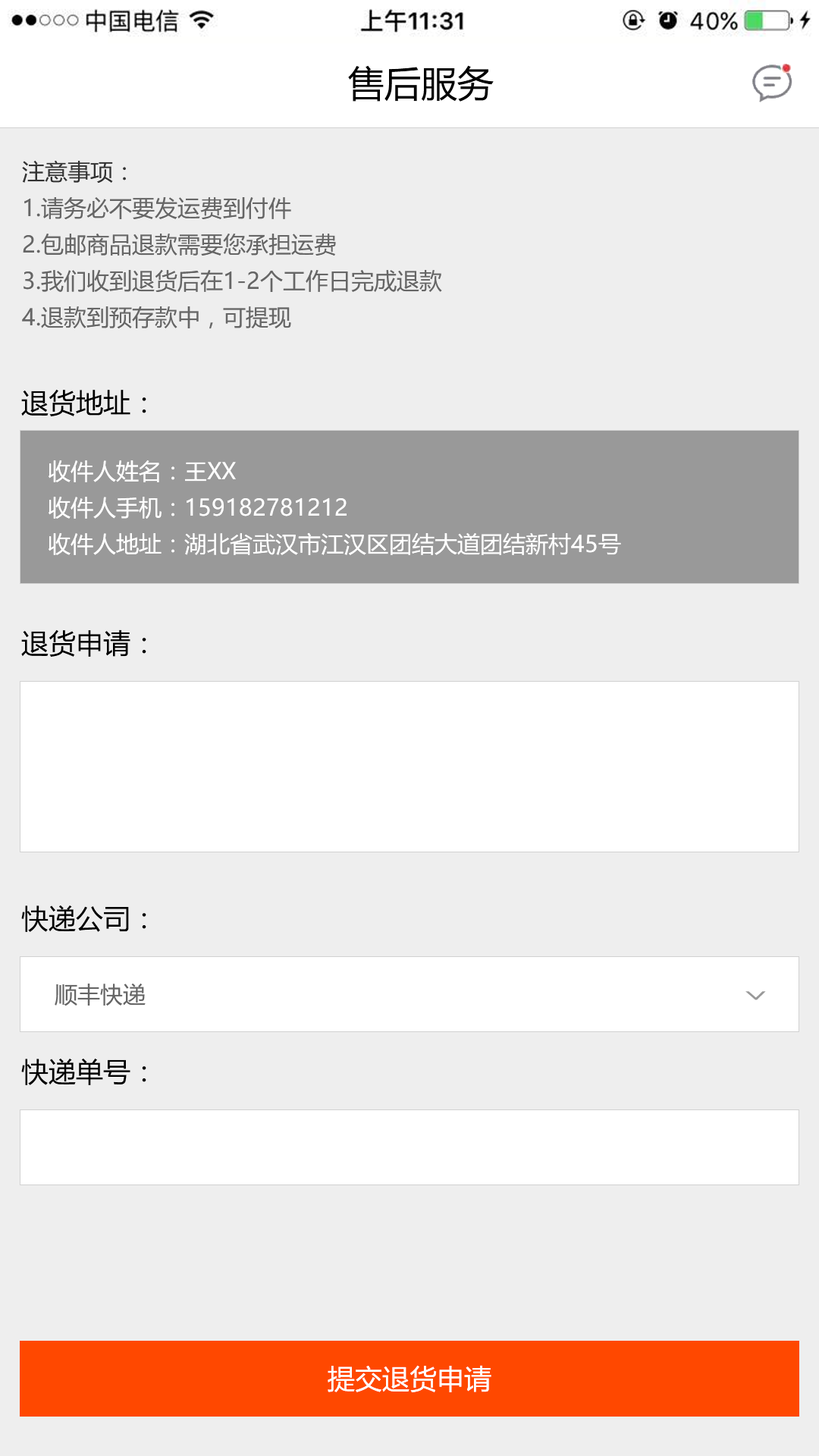
<style>
.page{position:relative;width:819px;height:1456px;background:#eeeeee}
.page>*{position:absolute;margin:0}
.t1{font:36.4px "MicrosoftYaHei";color:#000000}
.t2{font:22.7px/36.4px "MicrosoftYaHei";color:#666666}
.t3{font:22.7px/36.4px "MicrosoftYaHei";color:#333333}
.t4{font:27.3px "MicrosoftYaHei";color:#000000}
.t5{font:22.7px/36.4px "MicrosoftYaHei";color:#ffffff}
.t6{font:22.7px "MicrosoftYaHei";color:#666666}
.t7{font:39px "MicrosoftYaHei";color:#999999;scale:0.48 1}
.t8{font:27.3px "MicrosoftYaHei";color:#ffffff}
</style>
<div class="page">
<p class="t1" style="left:348px;top:65px;width:146px;height:37px">售后服务</p>
<p class="t2" style="left:22px;top:160px;width:420px;height:169px"><span class="t3">注意事项：<br></span>1.请务必不要发运费到付件<br>2.包邮商品退款需要您承担运费<br>3.我们收到退货后在1-2个工作日完成退款<br>4.退款到预存款中，可提现</p>
<p class="t4" style="left:21px;top:389px;width:125px;height:27px">退货地址：</p>
<p class="t5" style="left:49px;top:460px;width:572px;height:95px">收件人姓名：王XX<br>收件人手机：159182781212<br>收件人地址：湖北省武汉市江汉区团结大道团结新村45号</p>
<p class="t4" style="left:21px;top:629px;width:125px;height:28px">退货申请：</p>
<p class="t4" style="left:21px;top:905px;width:125px;height:27px">快递公司：</p>
<p class="t6" style="left:55px;top:984px;width:91px;height:22px">顺丰快递</p>
<p class="t7" style="left:745px;top:991px;width:21px;height:9px;rotate:-90deg">&lt;</p>
<p class="t4" style="left:21px;top:1059px;width:125px;height:26px">快递单号：</p>
<p class="t8" style="left:328px;top:1365px;width:163px;height:27px">提交退货申请</p>
</div>
